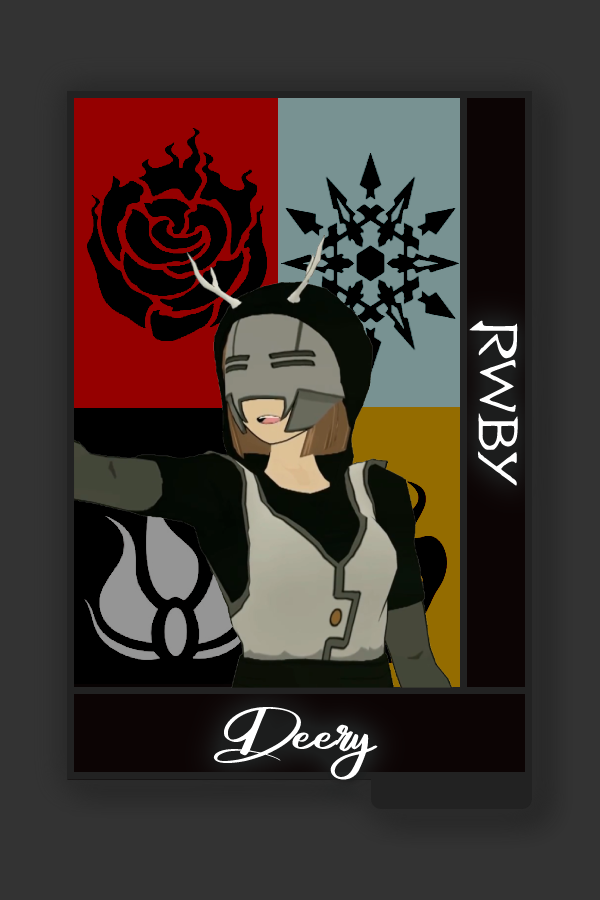
<style>
.page{position:relative;width:600px;height:900px;background:#333333}
.page>*{position:absolute;margin:0}
.t1{font:61.3px "RWBY_Style";color:#ffffff;scale:1.25 1}
.t2{font:75px "RosegaFREE";color:#ffffff}
</style>
<div class="page">
<p class="t1" style="left:469px;top:320px;width:49px;height:166px;rotate:90deg">RWBY</p>
<p class="t2" style="left:212px;top:706px;width:166px;height:79px">Deery</p>
</div>
